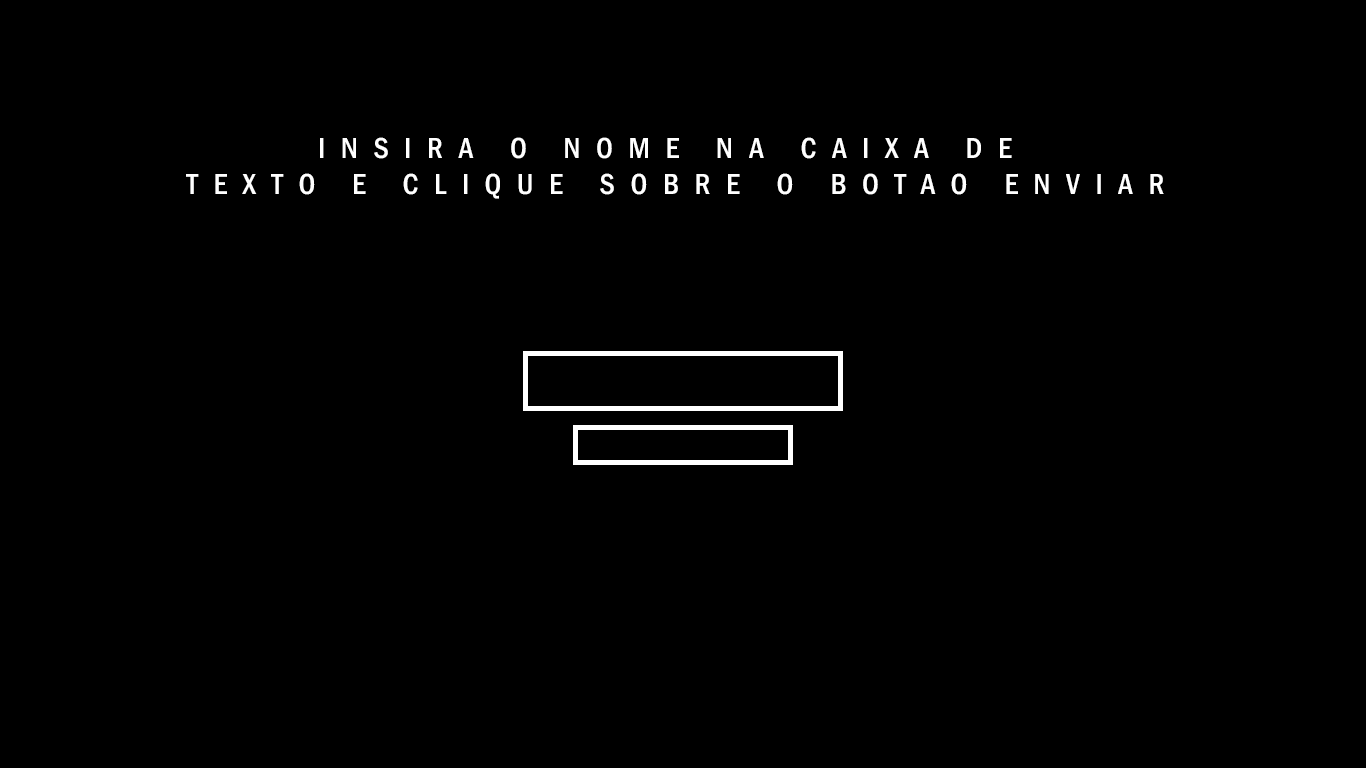
<style>
.page{position:relative;width:1366px;height:768px;background:#000000}
.page>*{position:absolute;margin:0}
.t1{font:29.9px "FranklinGothic-MediumCond";letter-spacing:0.52em;color:#ffffff;text-transform:uppercase}
.t2{font:29.9px "FranklinGothic-MediumCond";letter-spacing:0.52em;color:#ffffff}
</style>
<div class="page">
<p class="t1" style="left:186px;top:137px;width:978px;height:62px;text-align:center"><span class="t2">I</span>nsira o nome na caixa de <br>texto e clique sobre o botao enviar</p>
</div>
